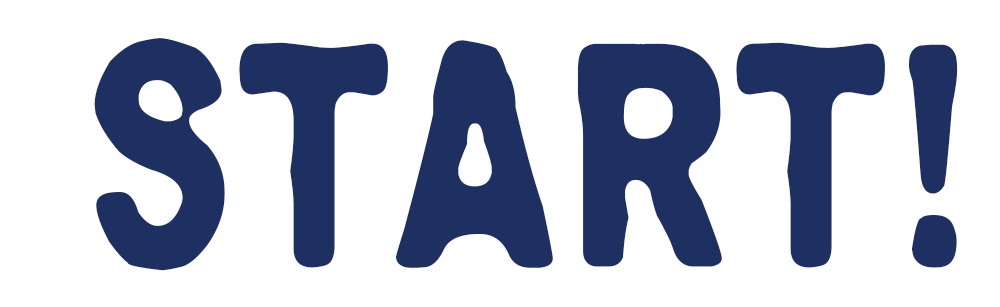
<style>
.page{position:relative;width:1000px;height:307px;background:#ffffff}
.page>*{position:absolute;margin:0}
.t1{font:300px "Neptunus";color:#1d3061}
</style>
<div class="page">
<p class="t1" style="left:94px;top:38px;width:864px;height:233px">START!</p>
</div>
